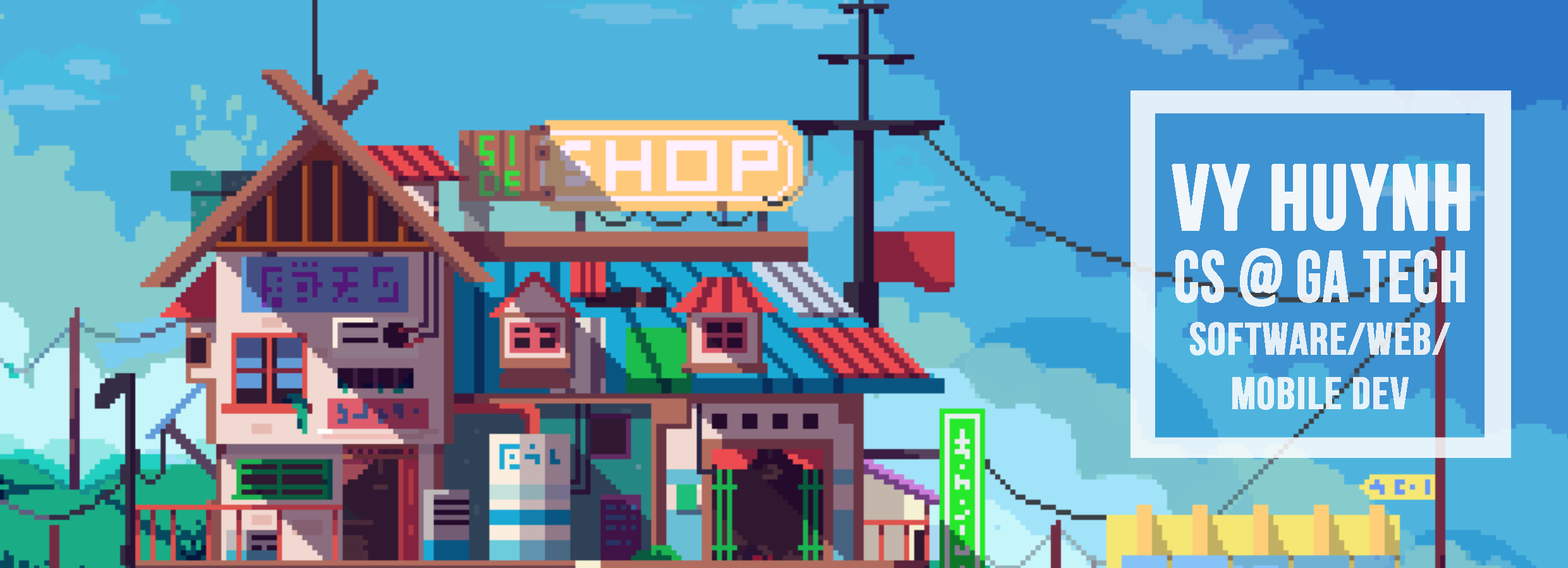
<style>
.page{position:relative;width:1568px;height:568px}
.page>*{position:absolute;margin:0}
.t1{font:91px "BebasNeue";letter-spacing:0.01em;color:#ffffff;font-weight:bold}
.t2{font:71.9px "BebasNeue";letter-spacing:0.01em;color:#ffffff;font-weight:bold;scale:0.87 1}
.t3{font:45.5px "BebasNeue";letter-spacing:0.01em;color:#e4eef7;font-weight:bold}
</style>
<div class="page">
<p class="t1" style="left:1172px;top:164px;width:298px;height:67px;opacity:0.9">VY HUYNH</p>
<p class="t2" style="left:1175px;top:248px;width:290px;height:59px;opacity:0.86">CS @ GA TECH</p>
<p class="t3" style="left:1190px;top:322px;width:260px;height:88px;text-align:center">SOFTWARE/WEB/<br>MOBILE DEV</p>
</div>
